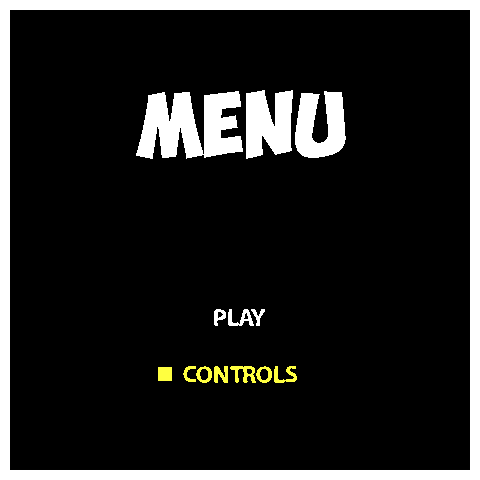
<style>
.page{position:relative;width:480px;height:480px;background:#000000}
.page>*{position:absolute;margin:0}
.t1{font:64px "ObelixPro";color:#ffffff}
.t2{font:24px "LooseySans";color:#ffffff}
.t3{font:24px "LooseySans";color:#ffff40}
</style>
<div class="page">
<p class="t1" style="left:136px;top:90px;width:210px;height:69px">Menu</p>
<p class="t2" style="left:214px;top:309px;width:51px;height:17px">PLAY</p>
<p class="t3" style="left:183px;top:366px;width:114px;height:17px">CONTROLS</p>
</div>
